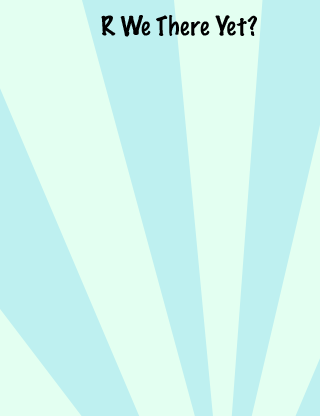
<style>
.page{position:relative;width:320px;height:416px;background:#e3fff1}
.page>*{position:absolute;margin:0}
.t1{font:24px "MarkerFelt-Thin";color:#000000}
</style>
<div class="page">
<p class="t1" style="left:101px;top:15px;width:156px;height:22px">R We There Yet?</p>
</div>
